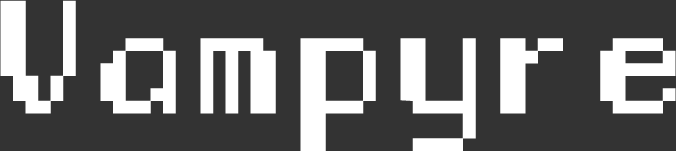
<style>
.page{position:relative;width:676px;height:151px;background:#333333}
.page>*{position:absolute;margin:0}
.t1{font:150px "ManaspaceReg";color:#ffffff}
</style>
<div class="page">
<p class="t1" style="left:0px;top:0px;width:676px;height:151px">Vampyre</p>
</div>
